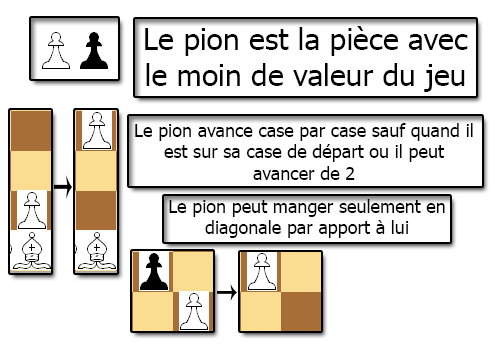
<style>
.page{position:relative;width:500px;height:350px;background:#ffffff}
.page>*{position:absolute;margin:0}
.t1{font:30px "Tahoma";color:#000000}
.t2{font:18px "Tahoma";color:#000000}
</style>
<div class="page">
<p class="t1" style="left:145px;top:26px;width:323px;height:66px;text-align:center">Le pion est la pièce avec le moin de valeur du jeu</p>
<p class="t2" style="left:135px;top:123px;width:338px;height:57px;text-align:center">Le pion avance case par case sauf quand il est sur sa case de départ ou il peut avancer de 2</p>
<p class="t2" style="left:169px;top:199px;width:276px;height:39px;text-align:center">Le pion peut manger seulement en diagonale par apport à lui</p>
</div>
